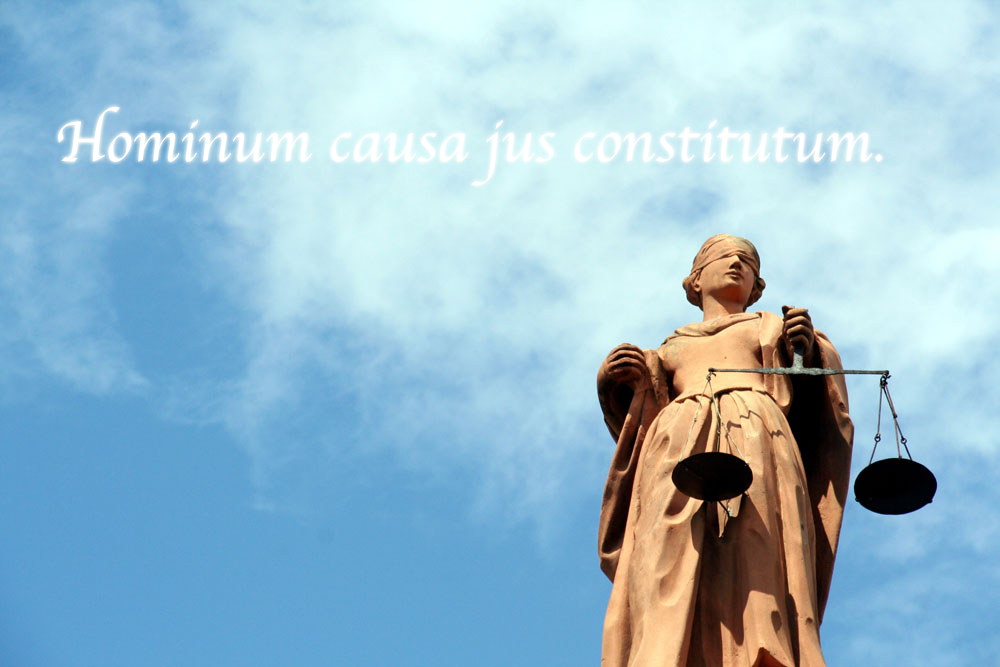
<style>
.page{position:relative;width:1000px;height:667px}
.page>*{position:absolute;margin:0}
.t1{font:60px "Apple-Chancery";color:#ffffff}
</style>
<div class="page">
<p class="t1" style="left:58px;top:107px;width:825px;height:79px">Hominum causa jus constitutum.</p>
</div>
